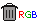
<style>
.page{position:relative;width:38px;height:25px;background:#ffffff}
.page>*{position:absolute;margin:0}
.t1{font:9px "Tahoma";color:#ff0000}
.t2{font:9px "Tahoma";color:#08aa00}
.t3{font:9px "Tahoma";color:#0006ff}
</style>
<div class="page">
<p class="t1" style="left:19px;top:11px;width:5px;height:7px">R</p>
<p class="t2" style="left:25px;top:11px;width:6px;height:7px">G</p>
<p class="t3" style="left:32px;top:11px;width:5px;height:7px">B</p>
</div>
